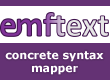
<style>
.page{position:relative;width:110px;height:80px;background:#643274}
.page>*{position:absolute;margin:0}
.t1{font:11px "Verdana-Bold";color:#ffffff}
</style>
<div class="page">
<p class="t1" style="left:5px;top:51px;width:99px;height:24px;text-align:center">concrete syntax<br>mapper</p>
</div>
